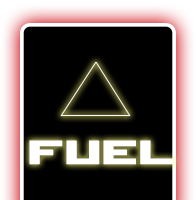
<style>
.page{position:relative;width:196px;height:200px;background:#000000}
.page>*{position:absolute;margin:0}
.t1{font:36px "Thrust";color:#ffffff;font-weight:bold}
</style>
<div class="page">
<p class="t1" style="left:29px;top:140px;width:144px;height:25px">FUEL</p>
</div>
